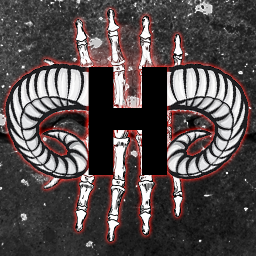
<style>
.page{position:relative;width:256px;height:256px}
.page>*{position:absolute;margin:0}
.t1{font:150px "MetalLord";color:#000000}
</style>
<div class="page">
<p class="t1" style="left:88px;top:67px;width:80px;height:108px">h</p>
</div>
